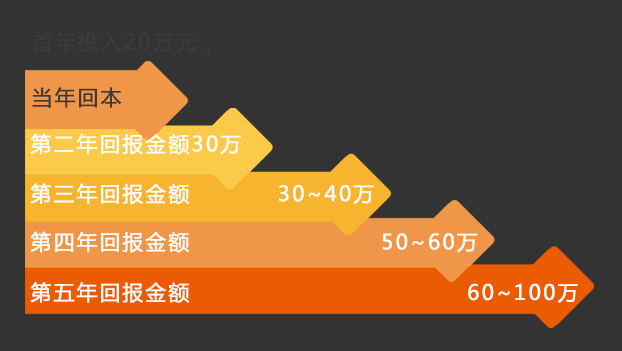
<style>
.page{position:relative;width:622px;height:351px;background:#333333}
.page>*{position:absolute;margin:0}
.t1{font:20.8px "MicrosoftYaHei";letter-spacing:0.1em;color:#ffffff;font-weight:bold}
</style>
<div class="page">
<p class="t1" style="left:30px;top:133px;width:211px;height:22px">第二年回报金额30万</p>
<p class="t1" style="left:30px;top:183px;width:344px;height:22px">第三年回报金额          30~40万</p>
<p class="t1" style="left:30px;top:231px;width:448px;height:22px">第四年回报金额                      50~60万</p>
<p class="t1" style="left:30px;top:282px;width:548px;height:21px">第五年回报金额                                60~100万</p>
</div>
